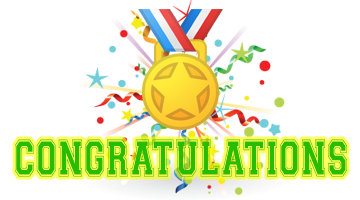
<style>
.page{position:relative;width:360px;height:200px;background:#ffffff}
.page>*{position:absolute;margin:0}
.t1{font:44px "College-Outline";letter-spacing:0.05em;color:#26bd03;scale:0.67 1}
</style>
<div class="page">
<p class="t1" style="left:15px;top:139px;width:332px;height:38px">CONGRATULATIONS</p>
</div>
